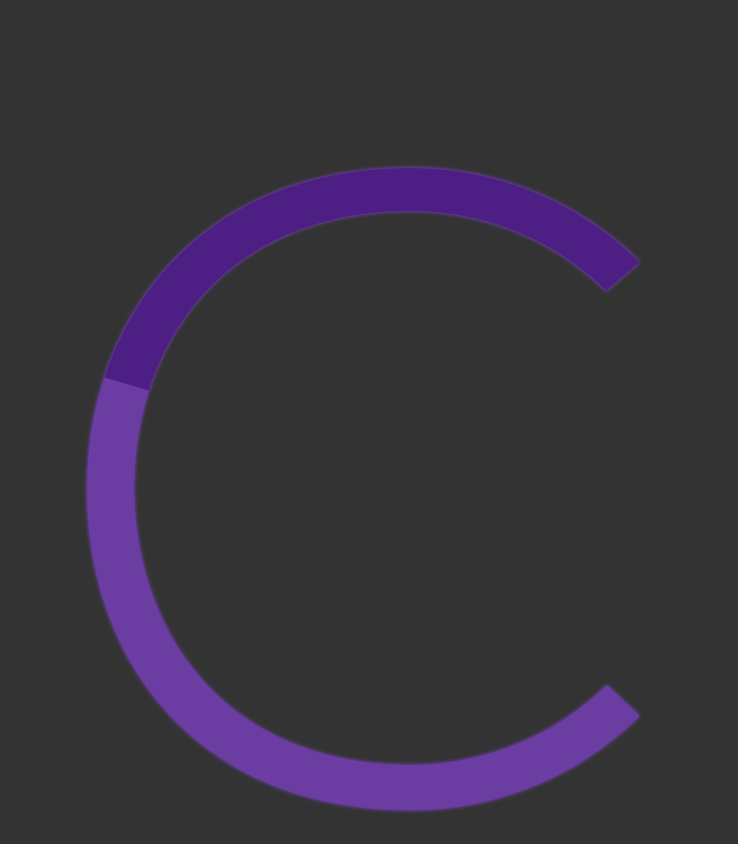
<style>
.page{position:relative;width:738px;height:844px;background:#333333}
.page>*{position:absolute;margin:0}
.t1{font:897.6px "NexaLight"}
</style>
<div class="page">
<p class="t1" style="left:87px;top:168px;width:553px;height:643px">C</p>
</div>
